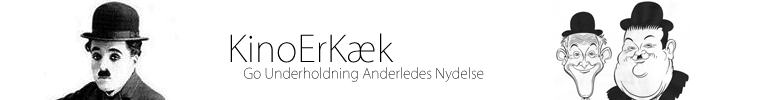
<style>
.page{position:relative;width:759px;height:100px;background:#ffffff}
.page>*{position:absolute;margin:0}
.t1{font:36px "KozGoPr6N-ExtraLight";color:#000000}
.t2{font:14px "KozGoPr6N-ExtraLight"}
</style>
<div class="page">
<p class="t1" style="left:230px;top:33px;width:164px;height:30px">KinoErKæk</p>
<p class="t2" style="left:244px;top:67px;width:240px;height:15px">Go Underholdning Anderledes Nydelse</p>
</div>
